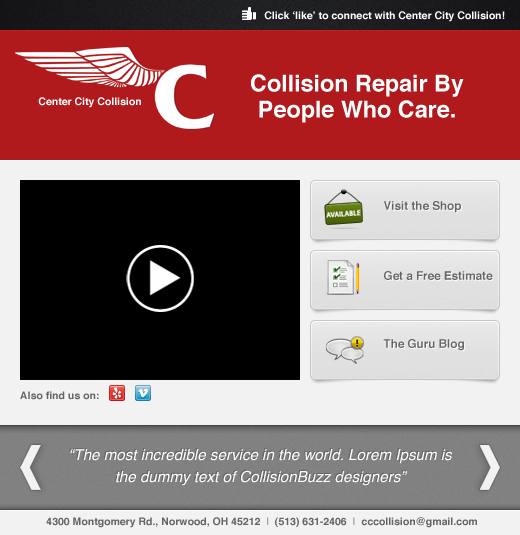
<style>
.page{position:relative;width:520px;height:535px;background:#f2f2f2}
.page>*{position:absolute;margin:0}
.t1{font:18px "Helvetica-Bold";color:#ffffff}
.t2{font:40px "Helvetica-Bold";color:#ffffff}
.t3{font:20px "Helvetica-Bold";color:#656565}
.t4{font:18px "Helvetica-Bold";color:#656565}
.t5{font:26px "Helvetica-Oblique";color:#ffffff}
.t6{font:18px "Helvetica-Bold";color:#a0a0a0}
</style>
<div class="page">
<p class="t1" style="left:264px;top:11px;width:241px;height:11px">Click ‘like’ to connect with Center City Collision!</p>
<p class="t2" style="left:251px;top:74px;width:213px;height:49px">Collision Repair By People Who Care.</p>
<p class="t1" style="left:38px;top:97px;width:103px;height:11px">Center City Collision</p>
<p class="t3" style="left:384px;top:201px;width:77px;height:12px">Visit the Shop</p>
<p class="t3" style="left:384px;top:271px;width:109px;height:9px">Get a Free Estimate</p>
<p class="t3" style="left:383px;top:339px;width:81px;height:12px">The Guru Blog</p>
<p class="t4" style="left:20px;top:391px;width:79px;height:9px">Also find us on:</p>
<p class="t5" style="left:70px;top:449px;width:382px;height:37px">“The most incredible service in the world. Lorem Ipsum is the dummy text of CollisionBuzz designers”</p>
<p class="t4" style="left:46px;top:517px;width:431px;height:11px">4300 Montgomery Rd., Norwood, OH 45212  <span class="t6">|</span>  (513) 631-2406  <span class="t6">|</span>  cccollision@gmail.com</p>
</div>
